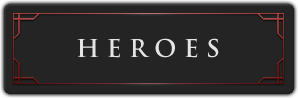
<style>
.page{position:relative;width:298px;height:98px;background:#242424}
.page>*{position:absolute;margin:0}
.t1{font:24px "TrajanPro-Bold";color:#e4e4e4}
</style>
<div class="page">
<p class="t1" style="left:77px;top:38px;width:142px;height:20px">H E R O E S</p>
</div>
